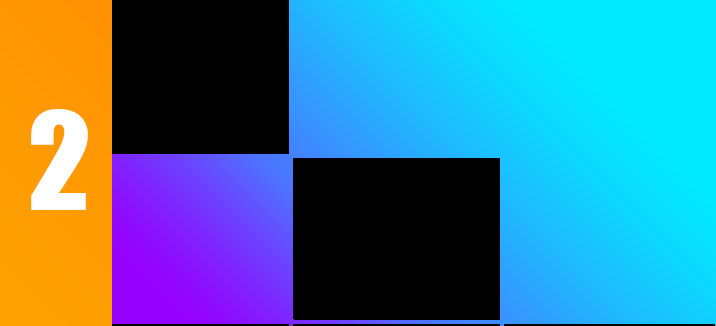
<style>
.page{position:relative;width:716px;height:326px;background:#000000}
.page>*{position:absolute;margin:0}
.t1{font:125px "Impact";color:#ffffff}
</style>
<div class="page">
<p class="t1" style="left:31px;top:109px;width:57px;height:101px">2</p>
</div>
